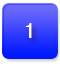
<style>
.page{position:relative;width:60px;height:68px}
.page>*{position:absolute;margin:0}
.t1{font:20.3px "Helvetica";color:#ffffff}
</style>
<div class="page">
<p class="t1" style="left:25px;top:23px;width:7px;height:15px">1</p>
</div>
